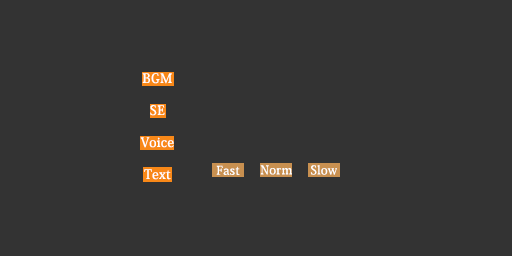
<style>
.page{position:relative;width:512px;height:256px;background:#333333}
.page>*{position:absolute;margin:0}
.t1{font:13px/32px "KozMinPro-Medium";letter-spacing:0.025em;color:#ffffff}
.t2{font:13px/32px "KozMinPro-Medium";letter-spacing:0.05em;color:#ffffff}
.t3{font:12px "KozMinPro-Medium";letter-spacing:0.025em;color:#ffffff}
</style>
<div class="page">
<p class="t1" style="left:140px;top:73px;width:34px;height:107px;text-align:center"><span class="t2">BGM<br>SE<br></span>Voice<br>Text</p>
<p class="t3" style="left:216px;top:165px;width:24px;height:10px">Fast</p>
<p class="t3" style="left:260px;top:165px;width:32px;height:10px">Norm</p>
<p class="t3" style="left:310px;top:165px;width:27px;height:10px">Slow</p>
</div>
